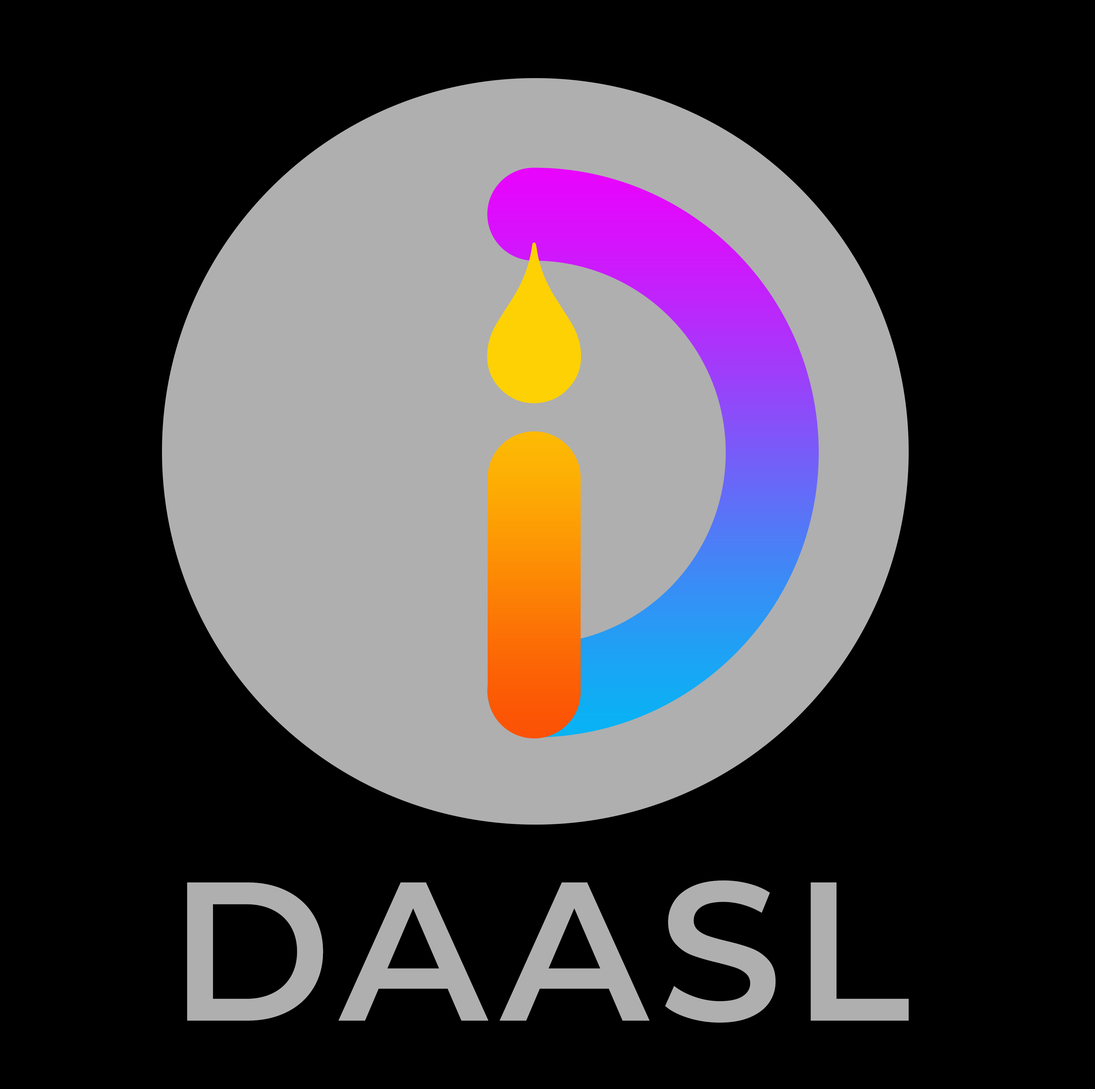
<style>
.page{position:relative;width:1095px;height:1089px;background:#000000}
.page>*{position:absolute;margin:0}
.t1{font:197.2px "Montserrat-SemiBold";letter-spacing:0.05em;color:#afafaf;text-transform:uppercase}
</style>
<div class="page">
<p class="t1" style="left:187px;top:880px;width:722px;height:143px">dAasl</p>
</div>
